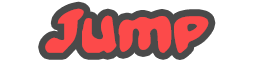
<style>
.page{position:relative;width:256px;height:64px;background:#ffffff}
.page>*{position:absolute;margin:0}
.t1{font:60px "FunnyPages";color:#fc4a4a}
</style>
<div class="page">
<p class="t1" style="left:45px;top:8px;width:164px;height:45px">Jump</p>
</div>
